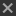
<style>
.page{position:relative;width:16px;height:16px;background:#333333}
.page>*{position:absolute;margin:0}
.t1{font:14px "Meiryo";letter-spacing:-0.1em;color:#a4a4a4}
</style>
<div class="page">
<p class="t1" style="left:2px;top:3px;width:11px;height:10px">✖</p>
</div>
